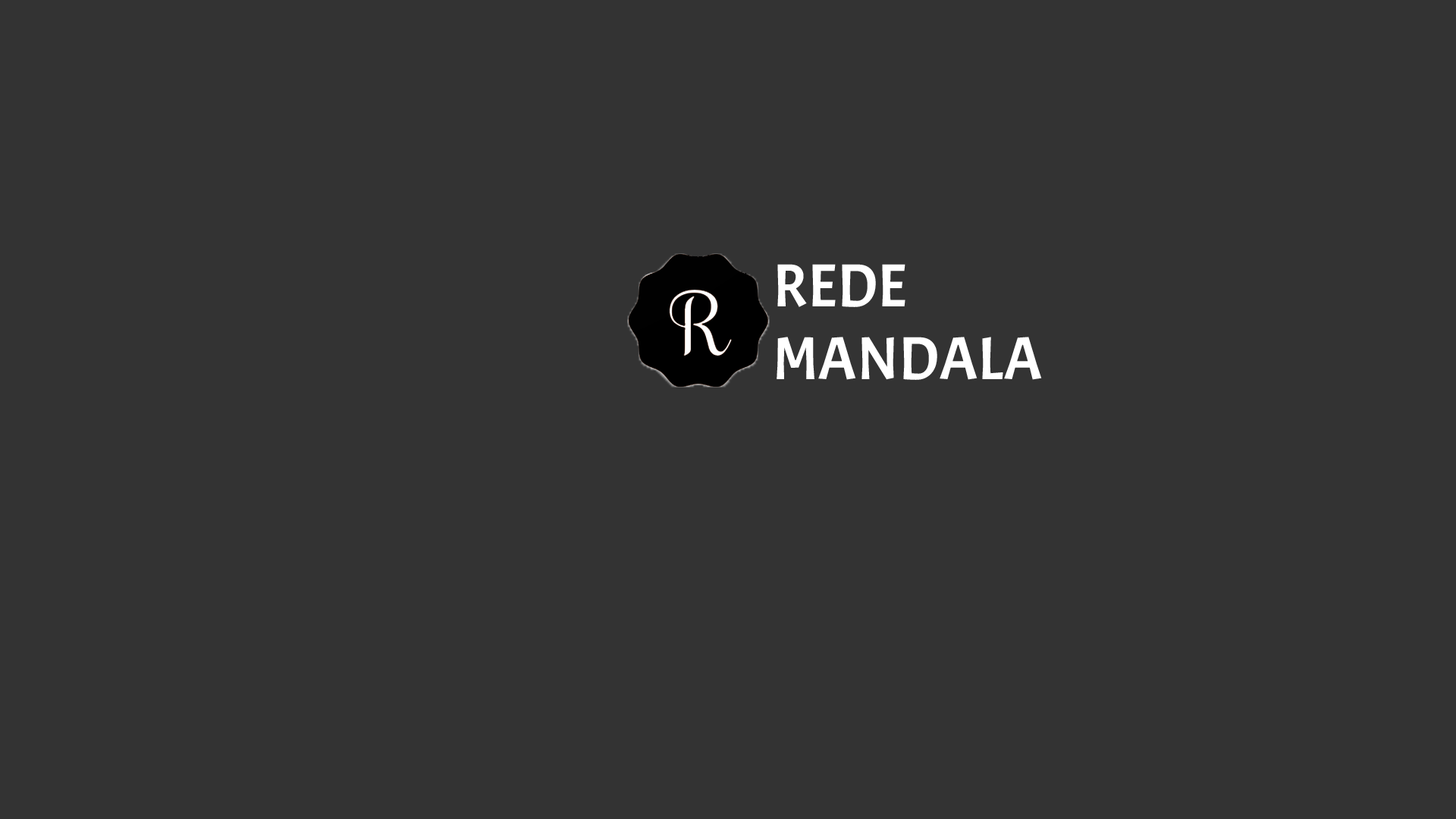
<style>
.page{position:relative;width:1456px;height:819px;background:#333333}
.page>*{position:absolute;margin:0}
.t1{font:60.7px "Acme-Regular";color:#ffffff}
</style>
<div class="page">
<p class="t1" style="left:777px;top:264px;width:265px;height:116px;text-align:right">REDE <br>MANDALA</p>
</div>
